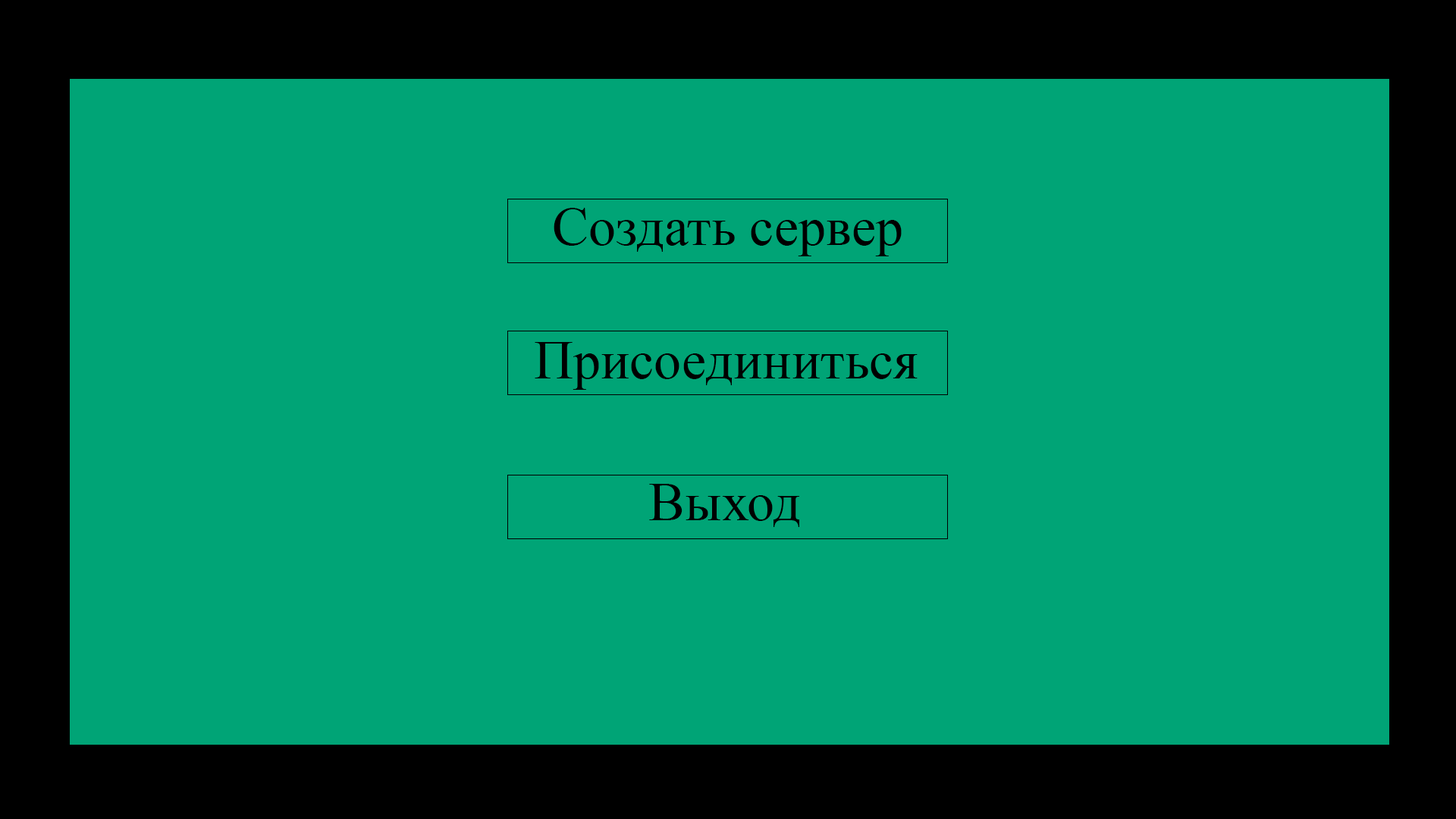
<style>
.page{position:relative;width:1456px;height:819px;background:#00a476}
.page>*{position:absolute;margin:0}
.t1{font:54.6px "TimesNewRomanPSMT";color:#000000}
</style>
<div class="page">
<p class="t1" style="left:554px;top:208px;width:348px;height:48px">Создать сервер</p>
<p class="t1" style="left:535px;top:342px;width:383px;height:48px">Присоединиться</p>
<p class="t1" style="left:649px;top:484px;width:150px;height:43px">Выход</p>
</div>
